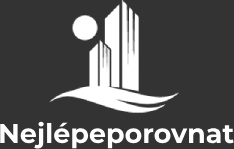
<style>
.page{position:relative;width:234px;height:149px;background:#333333}
.page>*{position:absolute;margin:0}
.t1{font:27px "Montserrat-Bold";color:#ffffff}
</style>
<div class="page">
<p class="t1" style="left:0px;top:121px;width:234px;height:28px">Nejlépeporovnat</p>
</div>
